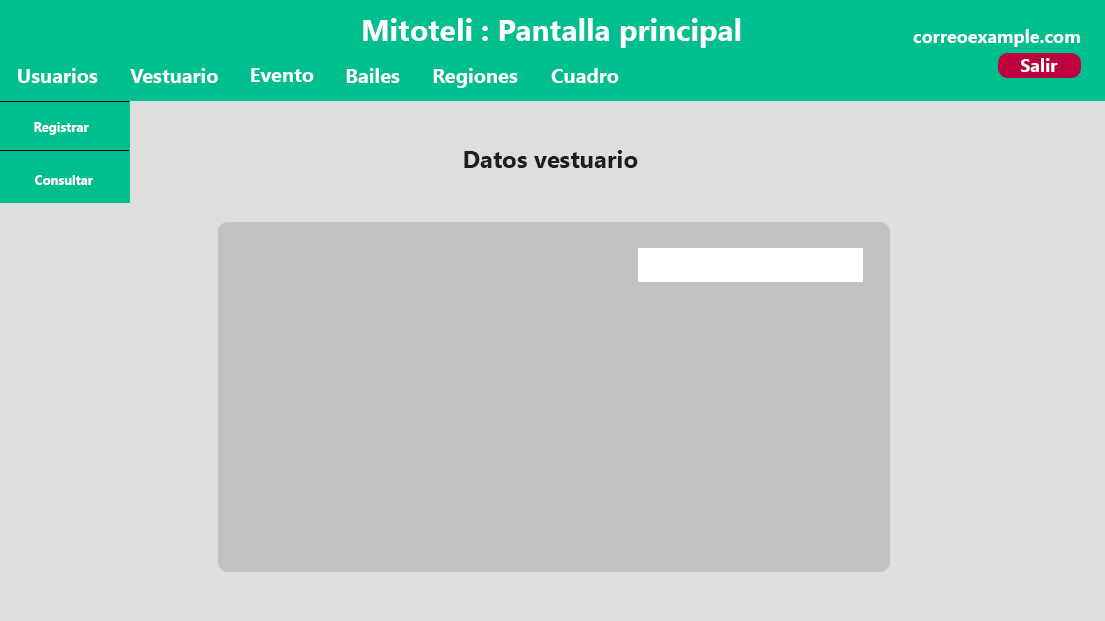
<style>
.page{position:relative;width:1105px;height:621px;background:#dedede}
.page>*{position:absolute;margin:0}
.t1{font:30px "SegoeUI-Bold";color:#ffffff}
.t2{font:18px "SegoeUI-Bold";color:#ffffff}
.t3{font:20px "SegoeUI-Bold";color:#ffffff}
.t4{font:13px "SegoeUI-Bold";color:#ffffff}
.t5{font:24px "SegoeUI-Bold";color:#1e1e1e}
</style>
<div class="page">
<p class="t1" style="left:363px;top:18px;width:378px;height:30px">Mitoteli : Pantalla principal</p>
<p class="t2" style="left:913px;top:29px;width:167px;height:18px">correoexample.com</p>
<p class="t2" style="left:1021px;top:58px;width:37px;height:14px">Salir</p>
<p class="t3" style="left:18px;top:68px;width:80px;height:15px">Usuarios</p>
<p class="t3" style="left:130px;top:68px;width:88px;height:15px">Vestuario</p>
<p class="t3" style="left:251px;top:68px;width:63px;height:14px">Evento</p>
<p class="t3" style="left:346px;top:68px;width:54px;height:15px">Bailes</p>
<p class="t3" style="left:433px;top:68px;width:85px;height:20px">Regiones</p>
<p class="t3" style="left:551px;top:68px;width:68px;height:15px">Cuadro</p>
<p class="t4" style="left:34px;top:122px;width:55px;height:13px">Registrar</p>
<p class="t5" style="left:464px;top:150px;width:174px;height:18px">Datos vestuario</p>
<p class="t4" style="left:34px;top:175px;width:59px;height:10px">Consultar</p>
</div>
